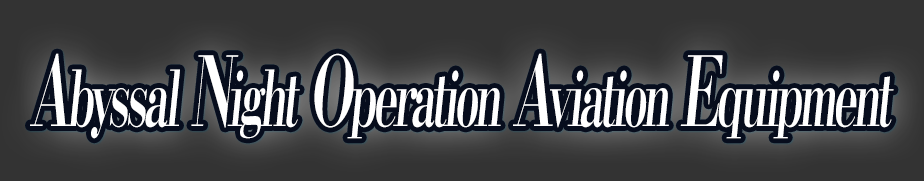
<style>
.page{position:relative;width:924px;height:181px;background:#333333}
.page>*{position:absolute;margin:0}
.t1{font:76.8px "KochoStd-Heavy";letter-spacing:-0.08em;color:#ffffff;font-style:italic;scale:0.57 1}
.t2{font:96px "KochoStd-Heavy";letter-spacing:-0.08em;color:#ffffff;font-style:italic;scale:0.57 1}
</style>
<div class="page">
<p class="t1" style="left:30px;top:53px;width:864px;height:86px"><span class="t2">A</span>byssal<span class="t2"> N</span>ight<span class="t2"> O</span>peration<span class="t2"> A</span>viation<span class="t2"> E</span>quipment</p>
</div>
